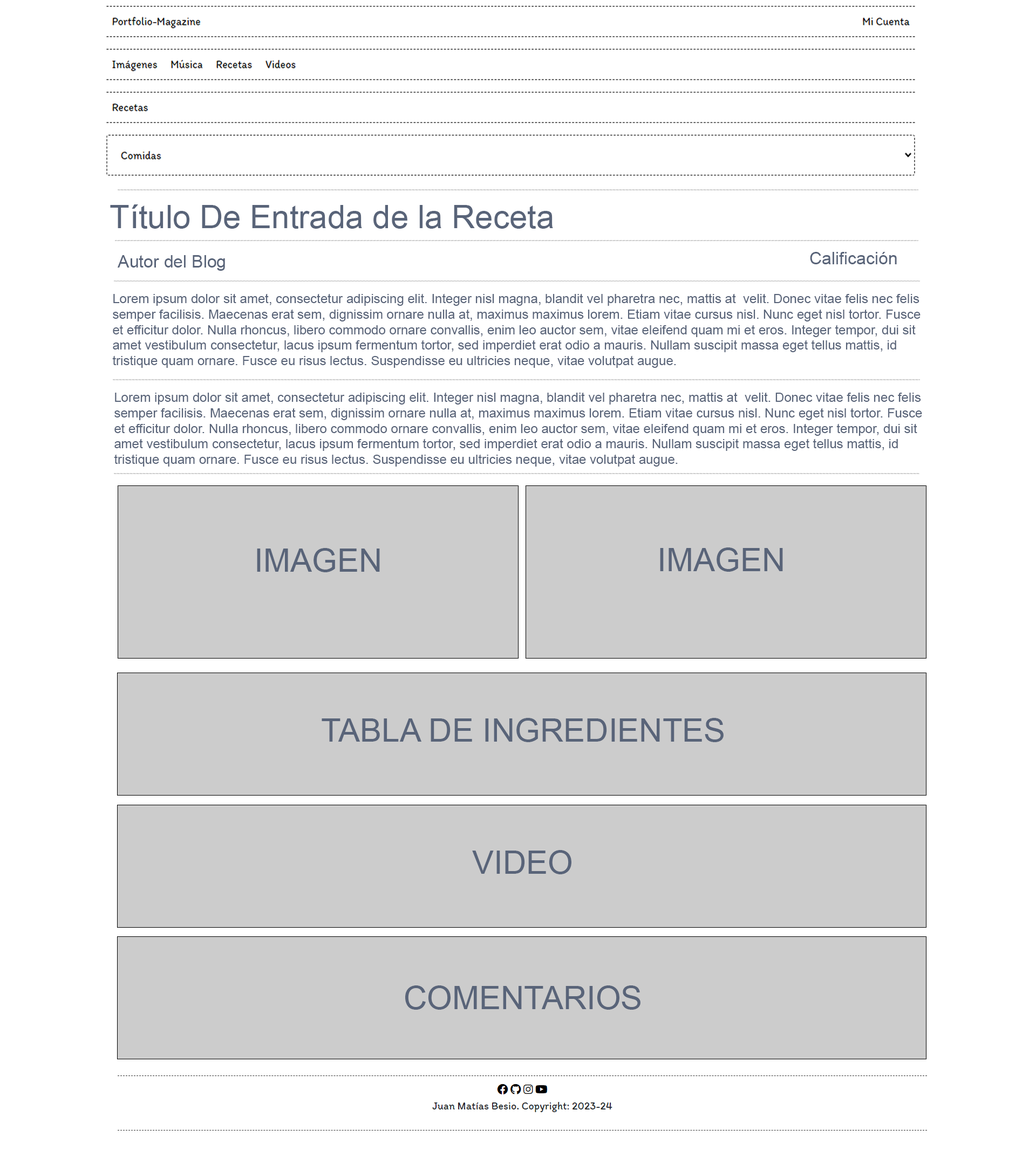
<style>
.page{position:relative;width:1036px;height:1151px;background:#ffffff}
.page>*{position:absolute;margin:0}
.t1{font:32.4px "ArialMT";color:#596479}
.t2{font:17.3px "ArialMT";color:#596479}
.t3{font:12.9px "ArialMT";color:#596479}
</style>
<div class="page">
<p class="t1" style="left:110px;top:204px;width:443px;height:25px">Título De Entrada de la Receta</p>
<p class="t2" style="left:117px;top:255px;width:108px;height:16px">Autor del Blog</p>
<p class="t2" style="left:810px;top:252px;width:87px;height:12px">Calificación</p>
<p class="t3" style="left:112px;top:293px;width:808px;height:75px">Lorem ipsum dolor sit amet, consectetur adipiscing elit. Integer nisl magna, blandit vel pharetra nec, mattis at  velit. Donec vitae felis nec felis <br>semper facilisis. Maecenas erat sem, dignissim ornare nulla at, maximus maximus lorem. Etiam vitae cursus nisl. Nunc eget nisl tortor. Fusce <br>et efficitur dolor. Nulla rhoncus, libero commodo ornare convallis, enim leo auctor sem, vitae eleifend quam mi et eros. Integer tempor, dui sit <br>amet vestibulum consectetur, lacus ipsum fermentum tortor, sed imperdiet erat odio a mauris. Nullam suscipit massa eget tellus mattis, id <br>tristique quam ornare. Fusce eu risus lectus. Suspendisse eu ultricies neque, vitae volutpat augue.</p>
<p class="t3" style="left:114px;top:392px;width:808px;height:75px">Lorem ipsum dolor sit amet, consectetur adipiscing elit. Integer nisl magna, blandit vel pharetra nec, mattis at  velit. Donec vitae felis nec felis <br>semper facilisis. Maecenas erat sem, dignissim ornare nulla at, maximus maximus lorem. Etiam vitae cursus nisl. Nunc eget nisl tortor. Fusce <br>et efficitur dolor. Nulla rhoncus, libero commodo ornare convallis, enim leo auctor sem, vitae eleifend quam mi et eros. Integer tempor, dui sit <br>amet vestibulum consectetur, lacus ipsum fermentum tortor, sed imperdiet erat odio a mauris. Nullam suscipit massa eget tellus mattis, id <br>tristique quam ornare. Fusce eu risus lectus. Suspendisse eu ultricies neque, vitae volutpat augue.</p>
<p class="t1" style="left:257px;top:548px;width:123px;height:24px">IMAGEN</p>
<p class="t1" style="left:660px;top:548px;width:123px;height:24px">IMAGEN</p>
<p class="t1" style="left:322px;top:718px;width:401px;height:24px">TABLA DE INGREDIENTES</p>
<p class="t1" style="left:472px;top:850px;width:99px;height:24px">VIDEO</p>
<p class="t1" style="left:405px;top:986px;width:235px;height:24px">COMENTARIOS</p>
</div>
